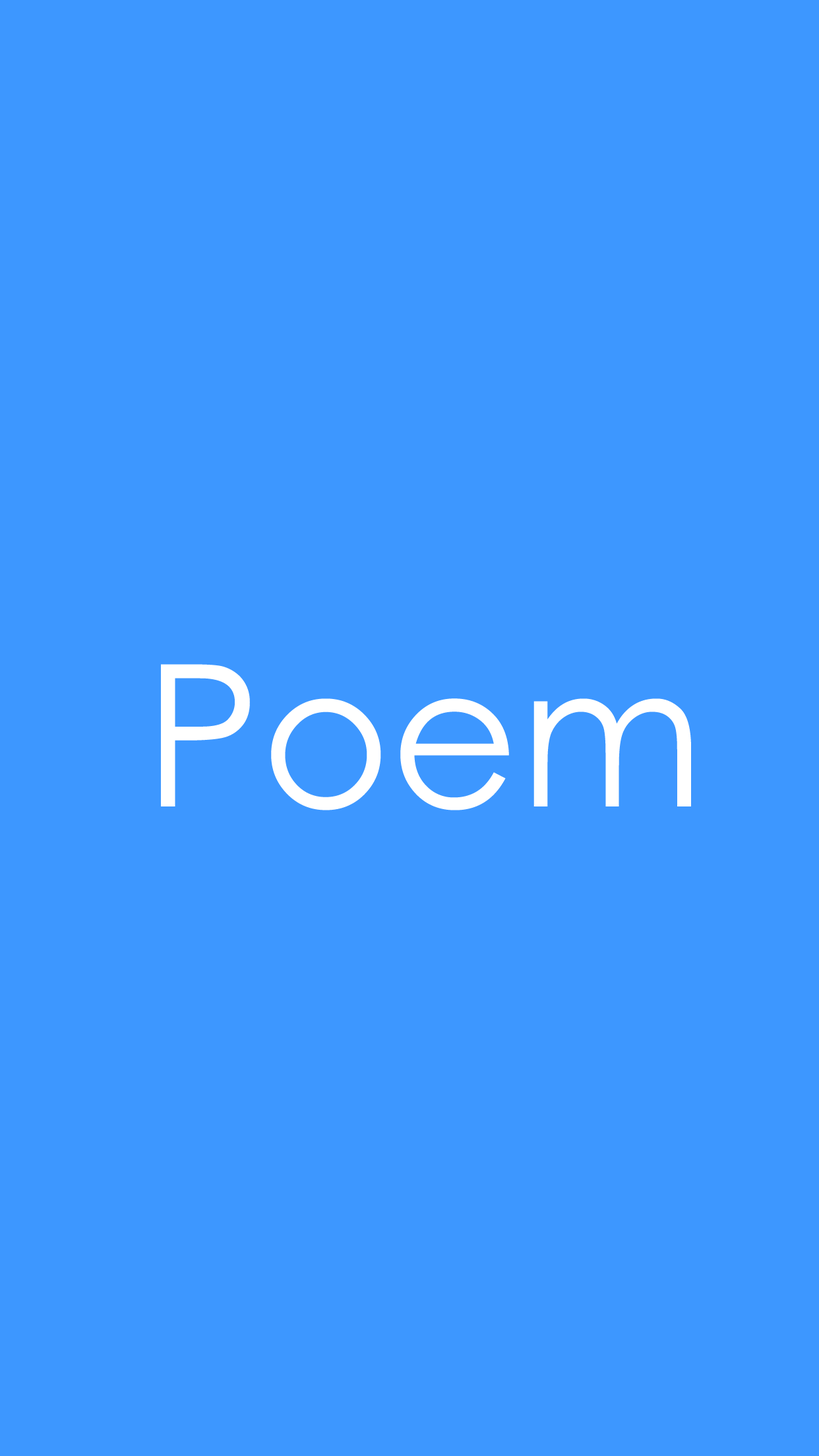
<style>
.page{position:relative;width:819px;height:1456px;background:#3d97ff}
.page>*{position:absolute;margin:0}
.t1{font:197.8px "STHeitiSC-Light";color:#ffffff}
</style>
<div class="page">
<p class="t1" style="left:161px;top:664px;width:530px;height:146px">Poem</p>
</div>
